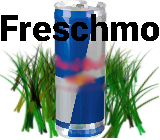
<style>
.page{position:relative;width:160px;height:140px;background:#ffffff}
.page>*{position:absolute;margin:0}
.t1{font:36px "Roboto-Black";color:#000000}
</style>
<div class="page">
<p class="t1" style="left:1px;top:14px;width:158px;height:27px">Freschmo</p>
</div>
